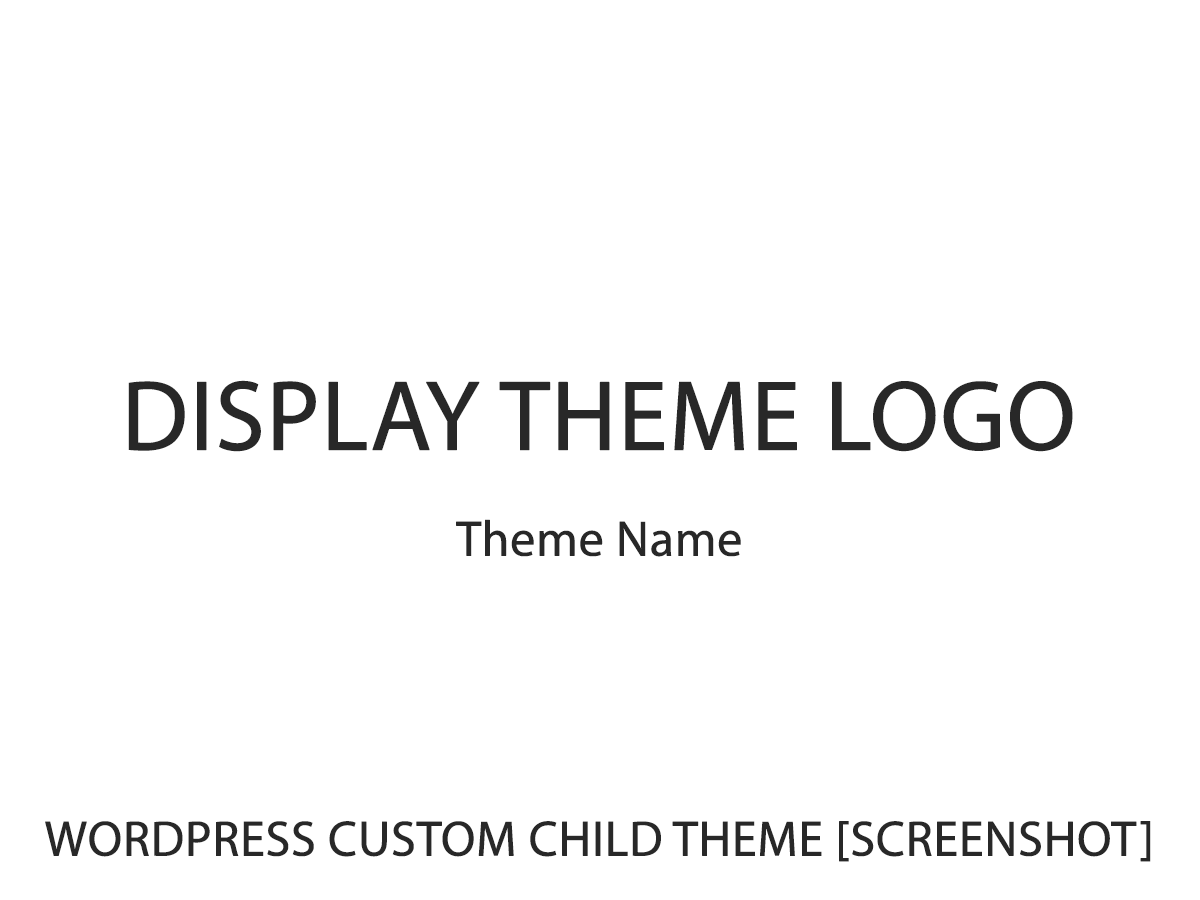
<style>
.page{position:relative;width:1200px;height:900px;background:#ffffff}
.page>*{position:absolute;margin:0}
.t1{font:100px "MyriadPro-Regular";letter-spacing:-0.01em;color:#282828;font-weight:bold}
.t2{font:50px "MyriadPro-Regular";letter-spacing:-0.01em;color:#282828;font-weight:bold}
</style>
<div class="page">
<p class="t1" style="left:128px;top:380px;width:945px;height:72px">DISPLAY THEME LOGO</p>
<p class="t2" style="left:456px;top:519px;width:285px;height:38px">Theme Name</p>
<p class="t2" style="left:45px;top:821px;width:1106px;height:41px">WORDPRESS CUSTOM CHILD THEME [SCREENSHOT]</p>
</div>
